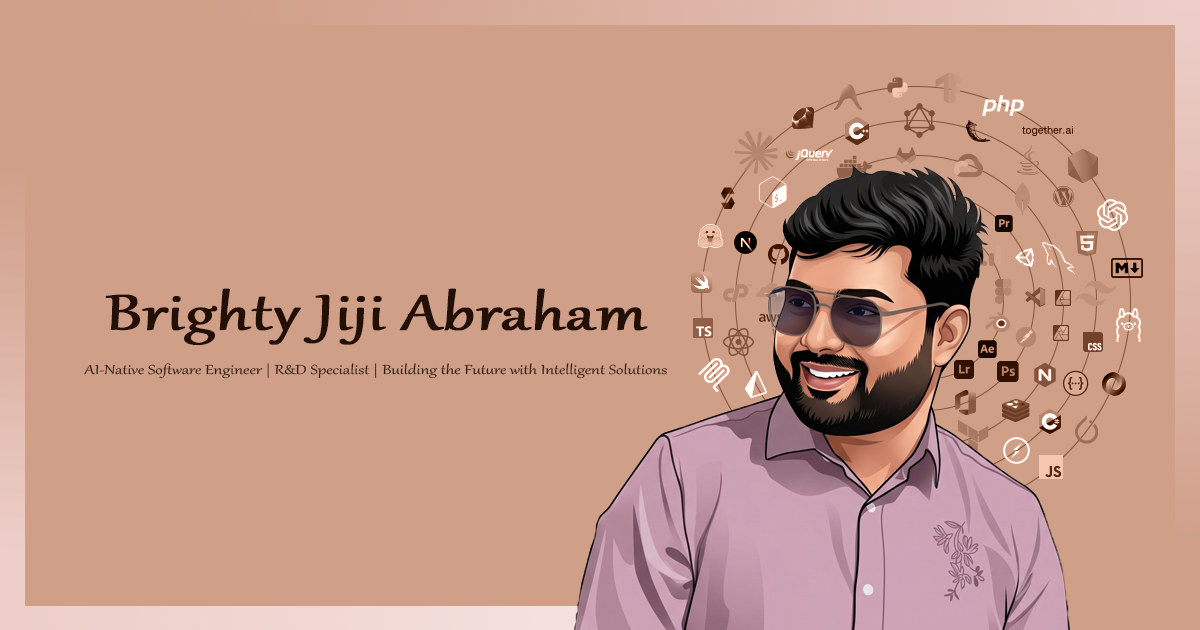
<style>
.page{position:relative;width:1200px;height:630px;background:#cf9f88}
.page>*{position:absolute;margin:0}
.t1{font:61px "Gabriola";color:#230f06;font-weight:bold;scale:1.29 1}
.t2{font:16px "Gabriola";color:#331e14;scale:1.29 1}
</style>
<div class="page">
<p class="t1" style="left:105px;top:288px;width:543px;height:57px">Brighty Jiji Abraham</p>
<p class="t2" style="left:84px;top:363px;width:583px;height:16px">AI-Native Software Engineer | R&amp;D Specialist | Building the Future with Intelligent Solutions</p>
</div>
